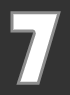
<style>
.page{position:relative;width:70px;height:95px;background:#333333}
.page>*{position:absolute;margin:0}
.t1{font:110px "Bauhaus93";letter-spacing:0.2em;color:#ffffff}
</style>
<div class="page">
<p class="t1" style="left:10px;top:11px;width:51px;height:74px">7</p>
</div>
